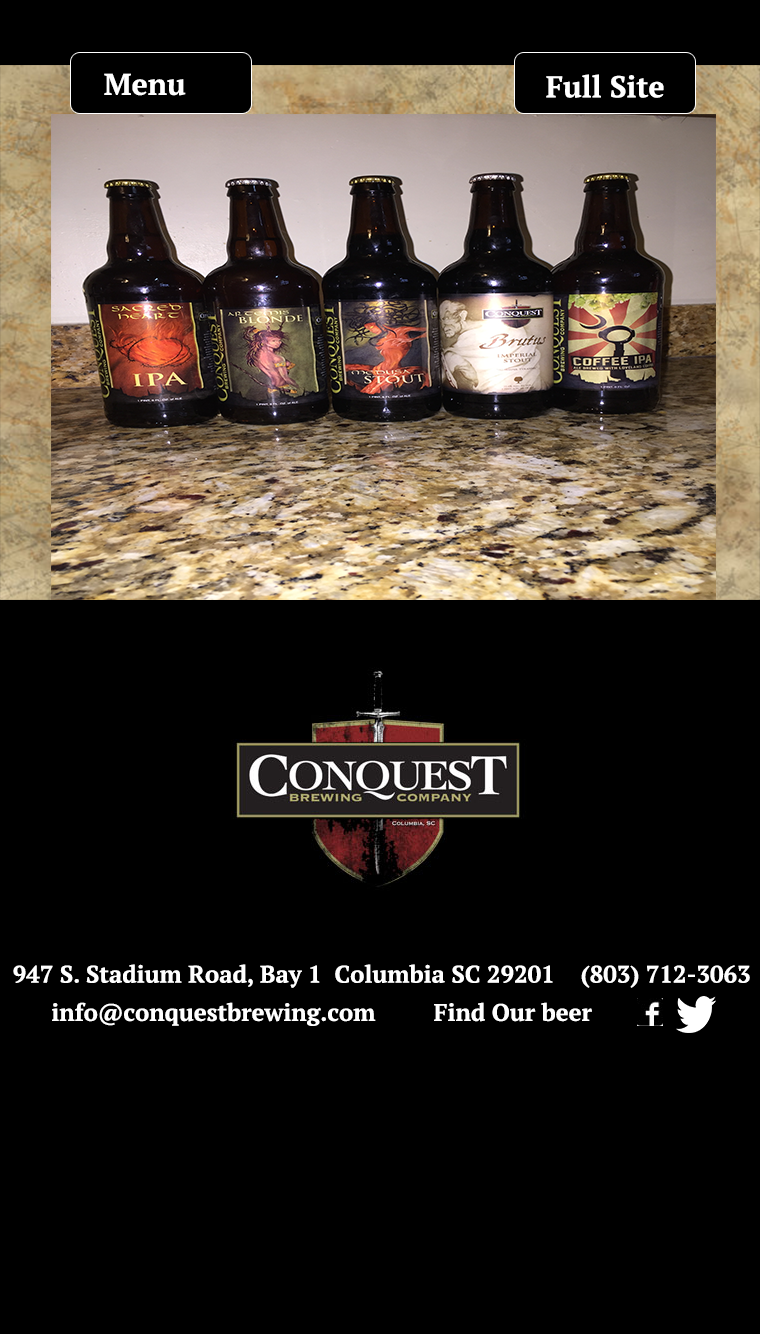
<style>
.page{position:relative;width:760px;height:1334px;background:#000000}
.page>*{position:absolute;margin:0}
.t1{font:30px "PTSerif-Bold";color:#ffffff}
.t2{font:24px "PTSerif-Bold";color:#ffffff}
</style>
<div class="page">
<p class="t1" style="left:104px;top:73px;width:82px;height:23px">Menu</p>
<p class="t1" style="left:546px;top:74px;width:118px;height:24px">Full Site</p>
<p class="t2" style="left:13px;top:964px;width:737px;height:24px">947 S. Stadium Road, Bay 1  Columbia SC 29201    (803) 712-3063</p>
<p class="t2" style="left:52px;top:1002px;width:540px;height:24px">info@conquestbrewing.com         Find Our beer</p>
</div>
